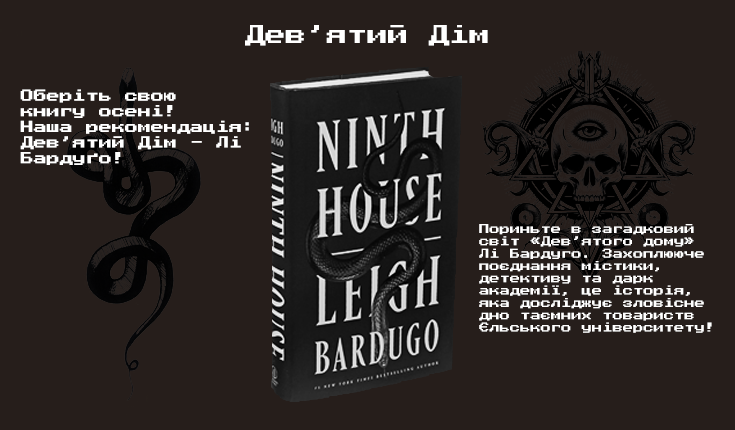
<style>
.page{position:relative;width:735px;height:430px;background:#261e1b}
.page>*{position:absolute;margin:0}
.t1{font:20.4px "PressStart2P-Regular";color:#ffffff}
.t2{font:13px "PressStart2P-Regular";color:#ffffff}
.t3{font:10.3px "PressStart2P-Regular";color:#ffffff}
</style>
<div class="page">
<p class="t1" style="left:245px;top:25px;width:243px;height:21px">Дев’ятий Дім</p>
<p class="t2" style="left:20px;top:89px;width:229px;height:76px">Оберіть свою<br>книгу осені!<br>Наша рекомендація:<br>Дев’ятий Дім - Лі<br>Бардуґо!</p>
<p class="t3" style="left:479px;top:224px;width:233px;height:109px">Пориньте в загадковий <br>світ «Дев’ятого дому» <br>Лі Бардуго. Захоплююче <br>поєднання містики, <br>детективу та дарк <br>академії, це історія, <br>яка досліджує зловісне <br>дно таємних товариств <br>Єльського університету!</p>
</div>
